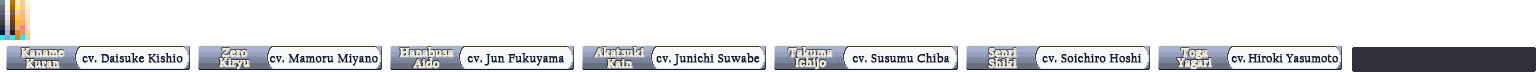
<style>
.page{position:relative;width:1536px;height:72px;background:#ffffff}
.page>*{position:absolute;margin:0}
.t1{font:12px/11px "CalifornianFB-Reg";letter-spacing:0.025em;color:#f8f0d0;font-weight:bold}
.t2{font:12px "CalifornianFB-Reg";letter-spacing:0.025em;color:#101838;font-weight:bold}
.t3{font:12px/10.5px "CalifornianFB-Reg";letter-spacing:0.025em;color:#f8f0d0;font-weight:bold}
.t4{font:9.6px/10.5px "CalifornianFB-Reg";letter-spacing:0.025em;color:#f8f0d0;font-weight:bold;scale:1.25 1}
.t5{font:12px "CalifornianFB-Reg";letter-spacing:0.01em;color:#101838;font-weight:bold}
.t6{font:12px "CalifornianFB-Reg";letter-spacing:-0.025em;color:#101838;font-weight:bold}
</style>
<div class="page">
<p class="t1" style="left:21px;top:48px;width:43px;height:20px;text-align:center">Kaname<br>Kuran</p>
<p class="t2" style="left:82px;top:53px;width:101px;height:10px">cv. Daisuke Kishio</p>
<p class="t3" style="left:219px;top:48px;width:31px;height:21px;text-align:center">Zero<br>Kir<span class="t4">y</span>u</p>
<p class="t2" style="left:270px;top:54px;width:108px;height:12px">cv. Mamoru Miyano</p>
<p class="t1" style="left:399px;top:47px;width:54px;height:21px;text-align:center">Hanabusa<br>Aido</p>
<p class="t2" style="left:467px;top:53px;width:97px;height:13px">cv. Jun Fukuyama</p>
<p class="t1" style="left:594px;top:47px;width:50px;height:21px;text-align:center">Akatsuki<br>Kain</p>
<p class="t2" style="left:656px;top:53px;width:104px;height:13px">cv. Junichi Suwabe</p>
<p class="t3" style="left:788px;top:47px;width:44px;height:22px;text-align:center">Takuma<br>Ichi<span class="t4">j</span>o</p>
<p class="t2" style="left:852px;top:53px;width:98px;height:10px">cv. Susumu Chiba</p>
<p class="t1" style="left:988px;top:48px;width:29px;height:20px;text-align:center">Senri<br>Shiki</p>
<p class="t2" style="left:1042px;top:53px;width:100px;height:10px">cv. Soichiro Hoshi</p>
<p class="t3" style="left:1177px;top:48px;width:35px;height:21px;text-align:center">To<span class="t4">g</span>a<br>Ya<span class="t4">g</span>ari</p>
<p class="t5" style="left:1231px;top:53px;width:107px;height:10px">c<span class="t6">v. </span>Hiroki Yasumoto</p>
</div>
